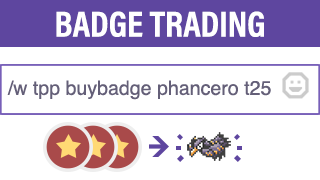
<style>
.page{position:relative;width:320px;height:180px;background:#ffffff}
.page>*{position:absolute;margin:0}
.t1{font:36.3px "AcuminProCond-Bold";color:#ffffff;text-transform:uppercase}
.t2{font:19.6px "Helvetica";color:#645f78}
</style>
<div class="page">
<p class="t1" style="left:56px;top:11px;width:208px;height:26px">Badge Trading</p>
<p class="t2" style="left:7px;top:80px;width:264px;height:20px">/w tpp buybadge phancero t25</p>
</div>
